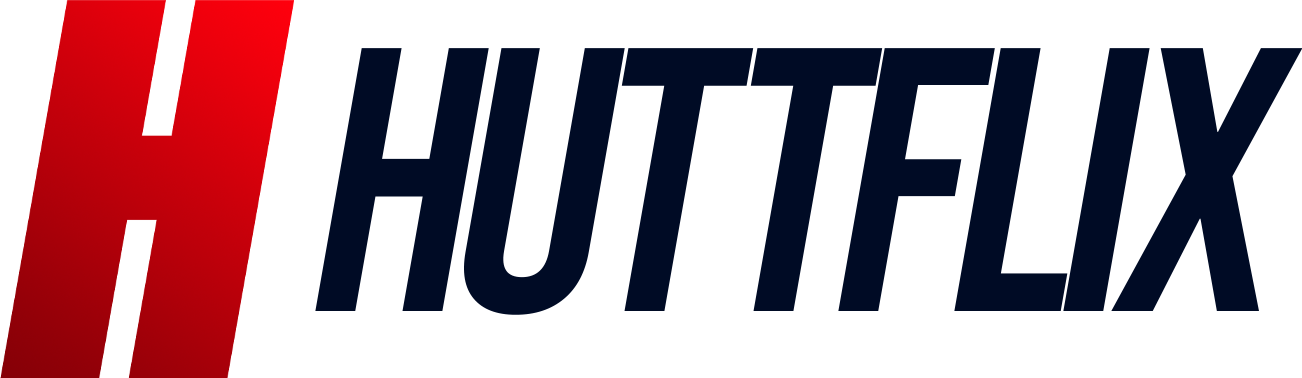
<style>
.page{position:relative;width:1302px;height:378px;background:#ffffff}
.page>*{position:absolute;margin:0}
.t1{font:375.5px "BebasKai";letter-spacing:-0.02em;color:#000b25;font-style:italic}
.t2{font:375.5px "BebasKai";letter-spacing:-0.06em;color:#000b25;font-style:italic}
.t3{font:375.5px "BebasKai";letter-spacing:-0.015em;color:#000b25;font-style:italic}
.t4{font:375.5px "BebasKai";letter-spacing:0.005em;color:#000b25;font-style:italic}
</style>
<div class="page">
<p class="t1" style="left:315px;top:48px;width:988px;height:267px"><span class="t2">h</span><span class="t3">u</span><span class="t4">t</span>tflix</p>
</div>
